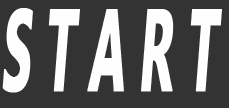
<style>
.page{position:relative;width:229px;height:108px;background:#333333}
.page>*{position:absolute;margin:0}
.t1{font:114.5px "MicrosoftTaiLe-Bold";letter-spacing:0.26em;color:#fefefe;font-weight:bold;font-style:italic;scale:0.44 1}
</style>
<div class="page">
<p class="t1" style="left:2px;top:8px;width:220px;height:85px">START</p>
</div>
